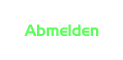
<style>
.page{position:relative;width:123px;height:60px;background:#ffffff}
.page>*{position:absolute;margin:0}
.t1{font:16px "AeroRegularSWFTE";color:#5cff58}
</style>
<div class="page">
<p class="t1" style="left:24px;top:24px;width:75px;height:12px">Abmelden</p>
</div>
